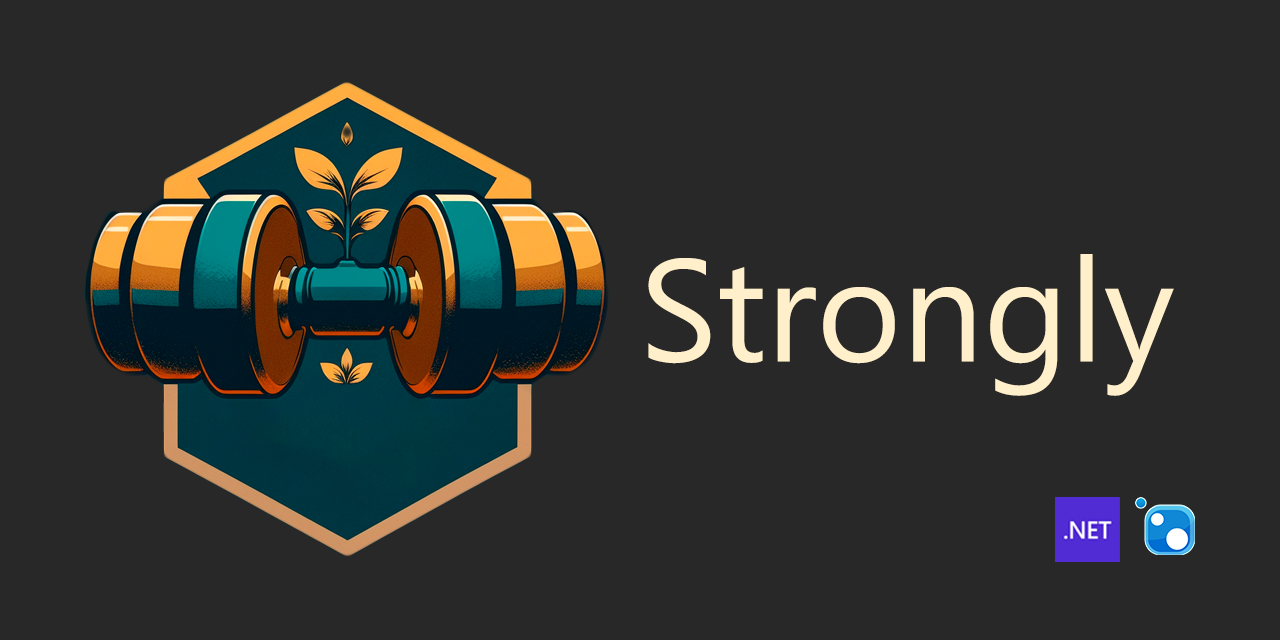
<style>
.page{position:relative;width:1280px;height:640px;background:#282828}
.page>*{position:absolute;margin:0}
.t1{font:145px "YuGothicUI-Regular";color:#ffefcb}
</style>
<div class="page">
<p class="t1" style="left:648px;top:254px;width:526px;height:142px">Strongly</p>
</div>
